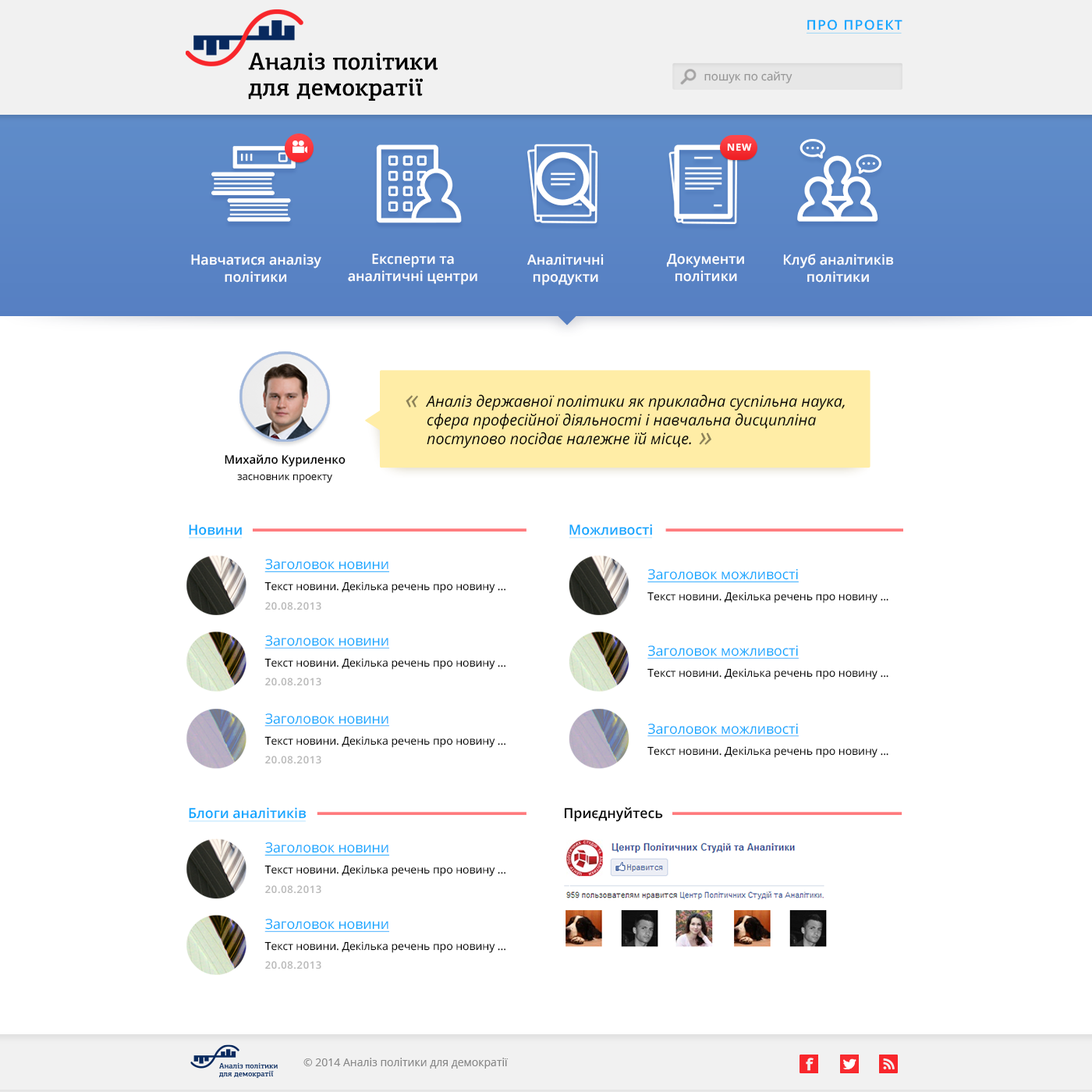
<style>
.page{position:relative;width:1092px;height:1092px;background:#ffffff}
.page>*{position:absolute;margin:0}
.t1{font:13.4px "OpenSans-Semibold";letter-spacing:0.075em;color:#0fa7ff}
.t2{font:11.7px "OpenSans";color:#959595}
.t3{font:9.7px "OpenSans-Bold";letter-spacing:0.075em;color:#ffffff}
.t4{font:13.9px "OpenSans-Semibold";color:#ffffff}
.t5{font:29.3px "OpenSans-Italic";color:#8d8259}
.t6{font:15.4px "OpenSans-Italic";color:#000000}
.t7{font:11.7px "OpenSans-Semibold";color:#000000}
.t8{font:10.3px/16.1px "OpenSans";color:#000000}
.t9{font:13.8px "OpenSans-Semibold";color:#0fa7ff}
.t10{font:13.8px "OpenSans";color:#0fa7ff;text-decoration:underline}
.t11{font:10.9px "OpenSans";color:#000000}
.t12{font:10.2px "OpenSans-Semibold";letter-spacing:0.05em;color:#b8b8b8}
.t13{font:13.8px "OpenSans-Semibold";color:#000000}
.t14{font:10.9px "OpenSans";color:#878787}
</style>
<div class="page">
<p class="t1" style="left:808px;top:20px;width:95px;height:10px">ПРО ПРОЕКТ</p>
<p class="t2" style="left:705px;top:71px;width:88px;height:12px">пошук по сайту</p>
<p class="t3" style="left:727px;top:143px;width:25px;height:8px">NEW</p>
<p class="t4" style="left:191px;top:254px;width:130px;height:28px;text-align:center">Навчатися аналiзу<br>полiтики</p>
<p class="t4" style="left:348px;top:254px;width:130px;height:31px;text-align:center">Експерти та<br>аналiтичнi центри</p>
<p class="t4" style="left:527px;top:254px;width:77px;height:32px;text-align:center">Аналiтичнi<br>продукти</p>
<p class="t4" style="left:666px;top:254px;width:78px;height:28px;text-align:center">Документи<br>полiтики</p>
<p class="t4" style="left:783px;top:254px;width:111px;height:28px;text-align:center">Клуб аналiтикiв<br>полiтики</p>
<p class="t5" style="left:406px;top:395px;width:12px;height:12px">«</p>
<p class="t6" style="left:426px;top:394px;width:419px;height:54px">Аналіз державної політики як прикладна суспільна наука, сфера професійної діяльності і навчальна дисципліна поступово посідає належне їй місце.</p>
<p class="t5" style="left:699px;top:432px;width:13px;height:13px">»</p>
<p class="t7" style="left:225px;top:454px;width:121px;height:29px;text-align:center">Михайло Куриленко<br><span class="t8">засновник проекту</span></p>
<p class="t9" style="left:189px;top:524px;width:53px;height:11px">Новини</p>
<p class="t9" style="left:570px;top:524px;width:82px;height:11px">Можливостi</p>
<p class="t10" style="left:265px;top:559px;width:124px;height:13px">Заголовок новини</p>
<p class="t10" style="left:648px;top:569px;width:151px;height:13px">Заголовок можливостi</p>
<p class="t11" style="left:265px;top:581px;width:241px;height:12px">Текст новини. Декiлька речень про новину ...</p>
<p class="t11" style="left:648px;top:591px;width:241px;height:12px">Текст новини. Декiлька речень про новину ...</p>
<p class="t12" style="left:265px;top:602px;width:56px;height:8px">20.08.2013</p>
<p class="t10" style="left:265px;top:635px;width:124px;height:13px">Заголовок новини</p>
<p class="t10" style="left:648px;top:645px;width:151px;height:14px">Заголовок можливостi</p>
<p class="t11" style="left:265px;top:658px;width:241px;height:11px">Текст новини. Декiлька речень про новину ...</p>
<p class="t12" style="left:265px;top:677px;width:56px;height:9px">20.08.2013</p>
<p class="t11" style="left:648px;top:668px;width:241px;height:12px">Текст новини. Декiлька речень про новину ...</p>
<p class="t10" style="left:265px;top:713px;width:124px;height:13px">Заголовок новини</p>
<p class="t10" style="left:648px;top:723px;width:151px;height:14px">Заголовок можливостi</p>
<p class="t11" style="left:265px;top:736px;width:241px;height:11px">Текст новини. Декiлька речень про новину ...</p>
<p class="t11" style="left:648px;top:746px;width:241px;height:12px">Текст новини. Декiлька речень про новину ...</p>
<p class="t12" style="left:265px;top:755px;width:56px;height:9px">20.08.2013</p>
<p class="t9" style="left:189px;top:807px;width:118px;height:12px">Блоги аналiтикiв</p>
<p class="t13" style="left:564px;top:807px;width:99px;height:15px">Приєднуйтесь</p>
<p class="t10" style="left:265px;top:842px;width:124px;height:13px">Заголовок новини</p>
<p class="t11" style="left:265px;top:865px;width:241px;height:11px">Текст новини. Декiлька речень про новину ...</p>
<p class="t12" style="left:265px;top:885px;width:56px;height:8px">20.08.2013</p>
<p class="t10" style="left:265px;top:918px;width:124px;height:14px">Заголовок новини</p>
<p class="t11" style="left:265px;top:941px;width:241px;height:12px">Текст новини. Декiлька речень про новину ...</p>
<p class="t12" style="left:265px;top:961px;width:56px;height:8px">20.08.2013</p>
<p class="t14" style="left:304px;top:1057px;width:205px;height:11px">© 2014 Аналiз полiтики для демократiї</p>
</div>
